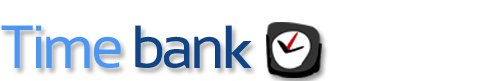
<style>
.page{position:relative;width:500px;height:81px;background:#ffffff}
.page>*{position:absolute;margin:0}
.t1{font:60.8px "Sansation-Regular";letter-spacing:-0.06em;color:#4b97f4}
.t2{font:60.8px "Sansation-Regular";letter-spacing:-0.06em;color:#0f4587}
.t3{font:66.9px "TwCenMT-Regular";letter-spacing:-0.06em;color:#0f4587;scale:1.06 1}
</style>
<div class="page">
<p class="t1" style="left:1px;top:25px;width:251px;height:43px">Time <span class="t2">ban</span><span class="t3">k</span></p>
</div>
